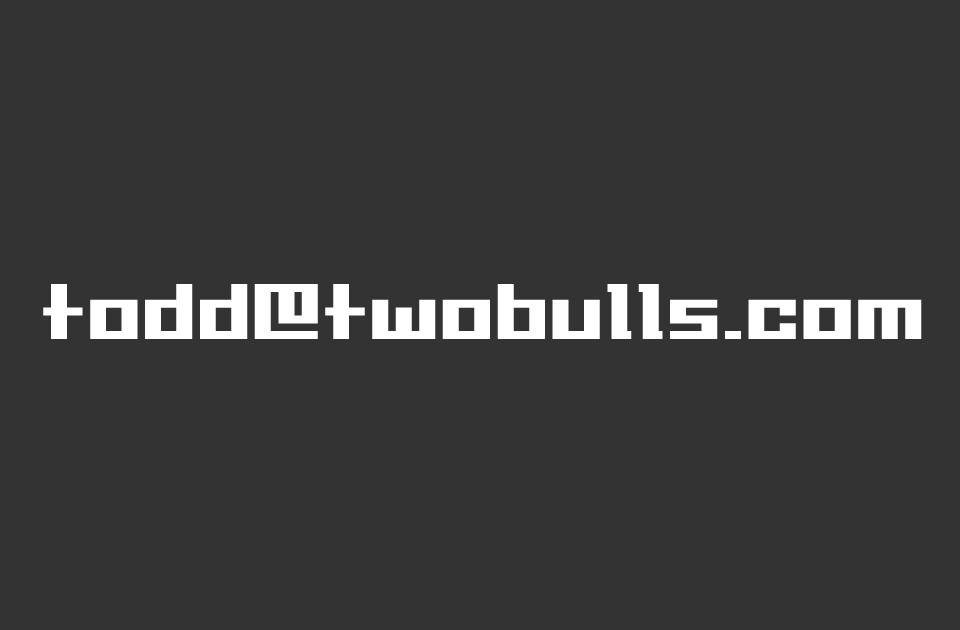
<style>
.page{position:relative;width:960px;height:630px;background:#333333}
.page>*{position:absolute;margin:0}
.t1{font:100px "Millennia";color:#ffffff}
</style>
<div class="page">
<p class="t1" style="left:43px;top:284px;width:879px;height:55px">todd@twobulls.com</p>
</div>
